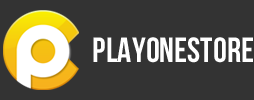
<style>
.page{position:relative;width:254px;height:100px;background:#333333}
.page>*{position:absolute;margin:0}
.t1{font:35px "BebasNeue";color:#ffffff}
</style>
<div class="page">
<p class="t1" style="left:93px;top:37px;width:160px;height:26px">PLAYONEStore</p>
</div>
